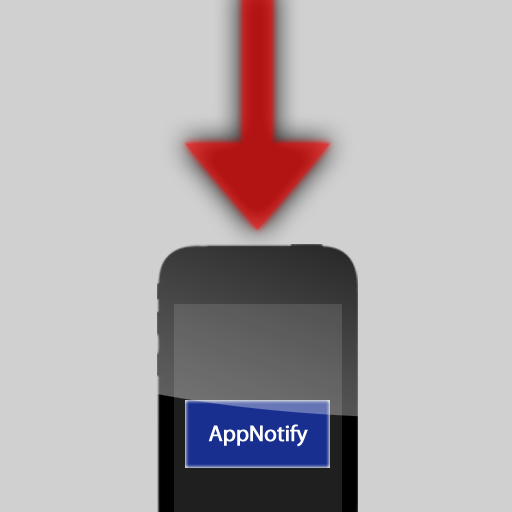
<style>
.page{position:relative;width:512px;height:512px;background:#d0d0d0}
.page>*{position:absolute;margin:0}
.t1{font:23px "MyriadPro-Regular";letter-spacing:-0.025em;color:#ffffff;font-weight:bold}
</style>
<div class="page">
<p class="t1" style="left:208px;top:424px;width:100px;height:23px">AppNotify</p>
</div>
